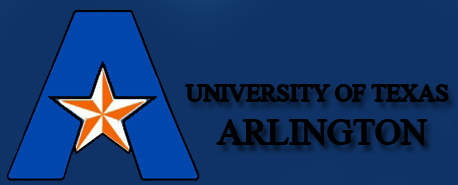
<style>
.page{position:relative;width:458px;height:185px;background:#0f3367}
.page>*{position:absolute;margin:0}
.t1{font:24px "TimesNewRomanPSMT";color:#000102}
.t2{font:36px "TimesNewRomanPSMT";color:#000102}
</style>
<div class="page">
<p class="t1" style="left:186px;top:85px;width:262px;height:60px">UNIVERSITY OF TEXAS<br><span class="t2">ARLINGTON</span></p>
</div>
